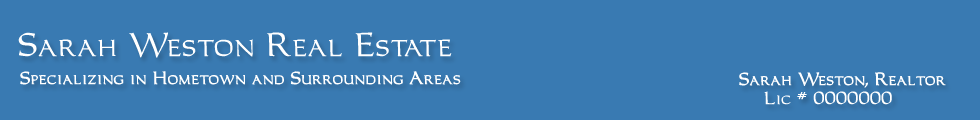
<style>
.page{position:relative;width:980px;height:120px;background:#397ab2}
.page>*{position:absolute;margin:0}
.t1{font:30px "CarletonNormal";color:#ffffff;font-weight:bold}
.t2{font:16px "CarletonNormal";color:#ffffff;font-weight:bold}
</style>
<div class="page">
<p class="t1" style="left:18px;top:32px;width:434px;height:26px">Sarah Weston Real Estate</p>
<p class="t2" style="left:20px;top:71px;width:441px;height:14px">Specializing in Hometown and Surrounding Areas</p>
<p class="t2" style="left:739px;top:72px;width:207px;height:16px">Sarah Weston, Realtor</p>
<p class="t2" style="left:764px;top:91px;width:128px;height:14px">Lic # 0000000</p>
</div>
